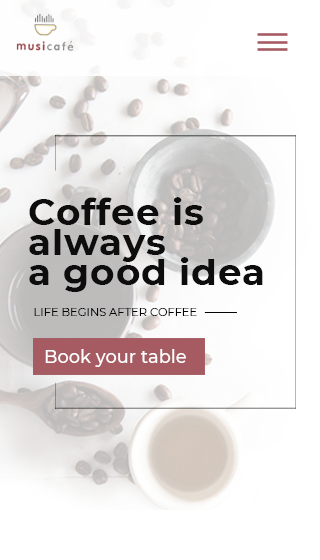
<style>
.page{position:relative;width:320px;height:560px;background:#ffffff}
.page>*{position:absolute;margin:0}
.t1{font:36px/30px "Montserrat-Bold";letter-spacing:0.025em;color:#0d0d0d;scale:1.03 1}
.t2{font:11px "Montserrat-Regular";color:#040404;scale:1.03 1}
.t3{font:17.9px "Montserrat-Medium";color:#ffffff}
</style>
<div class="page">
<p class="t1" style="left:29px;top:197px;width:234px;height:95px">Coffee is always <br>a good idea</p>
<p class="t2" style="left:34px;top:308px;width:163px;height:8px">LIFE BEGINS AFTER COFFEE</p>
<p class="t3" style="left:45px;top:349px;width:141px;height:18px">Book your table</p>
</div>
